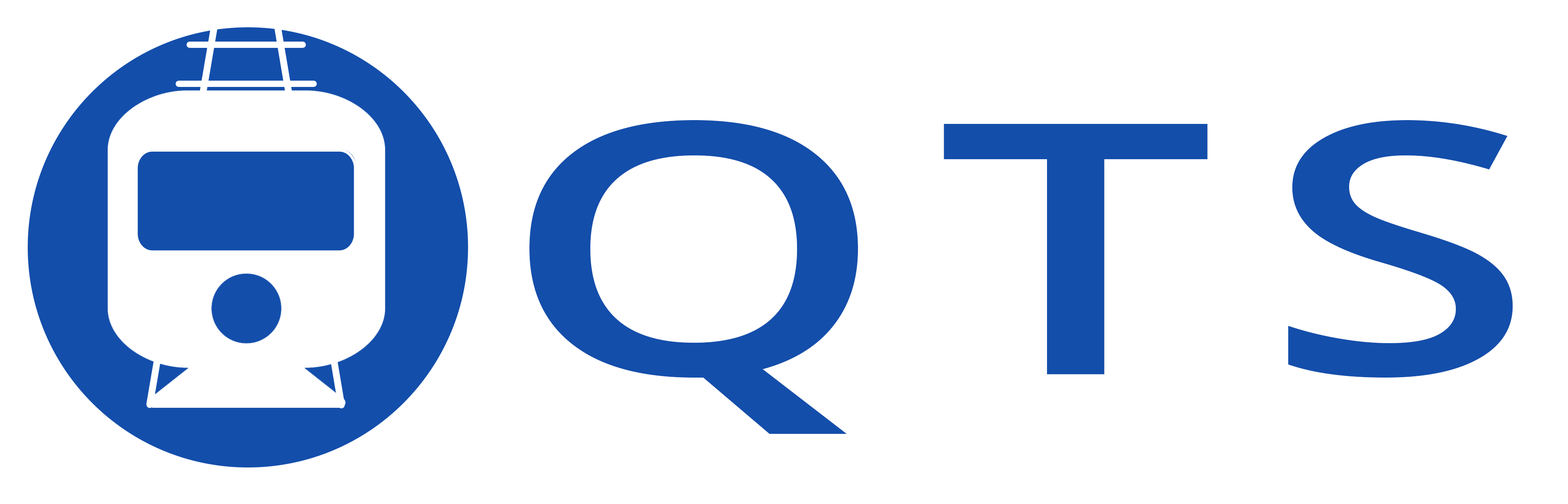
<style>
.page{position:relative;width:1568px;height:504px;background:#ffffff}
.page>*{position:absolute;margin:0}
.t1{font:351px "OpenSans-Semibold";letter-spacing:0.1em;color:#134eab;scale:1.4 1}
</style>
<div class="page">
<p class="t1" style="left:529px;top:120px;width:984px;height:314px">QTS</p>
</div>
